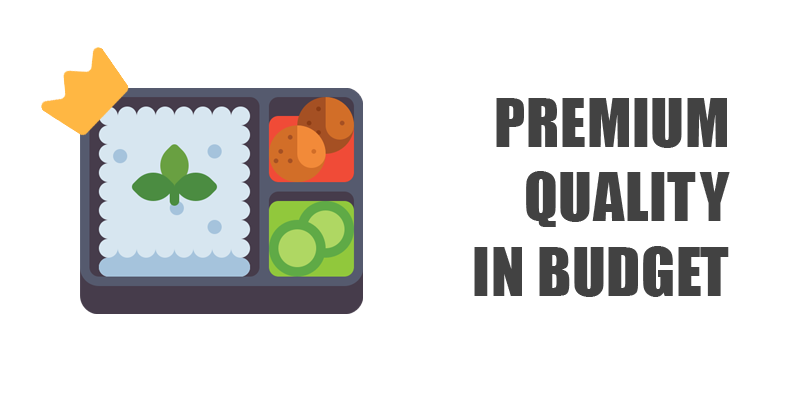
<style>
.page{position:relative;width:800px;height:400px;background:#ffffff}
.page>*{position:absolute;margin:0}
.t1{font:62px "Impact";letter-spacing:0.01em;color:#424242}
</style>
<div class="page">
<p class="t1" style="left:474px;top:98px;width:256px;height:199px;text-align:right">PREMIUM<br>QUALITY <br>IN BUDGET</p>
</div>
